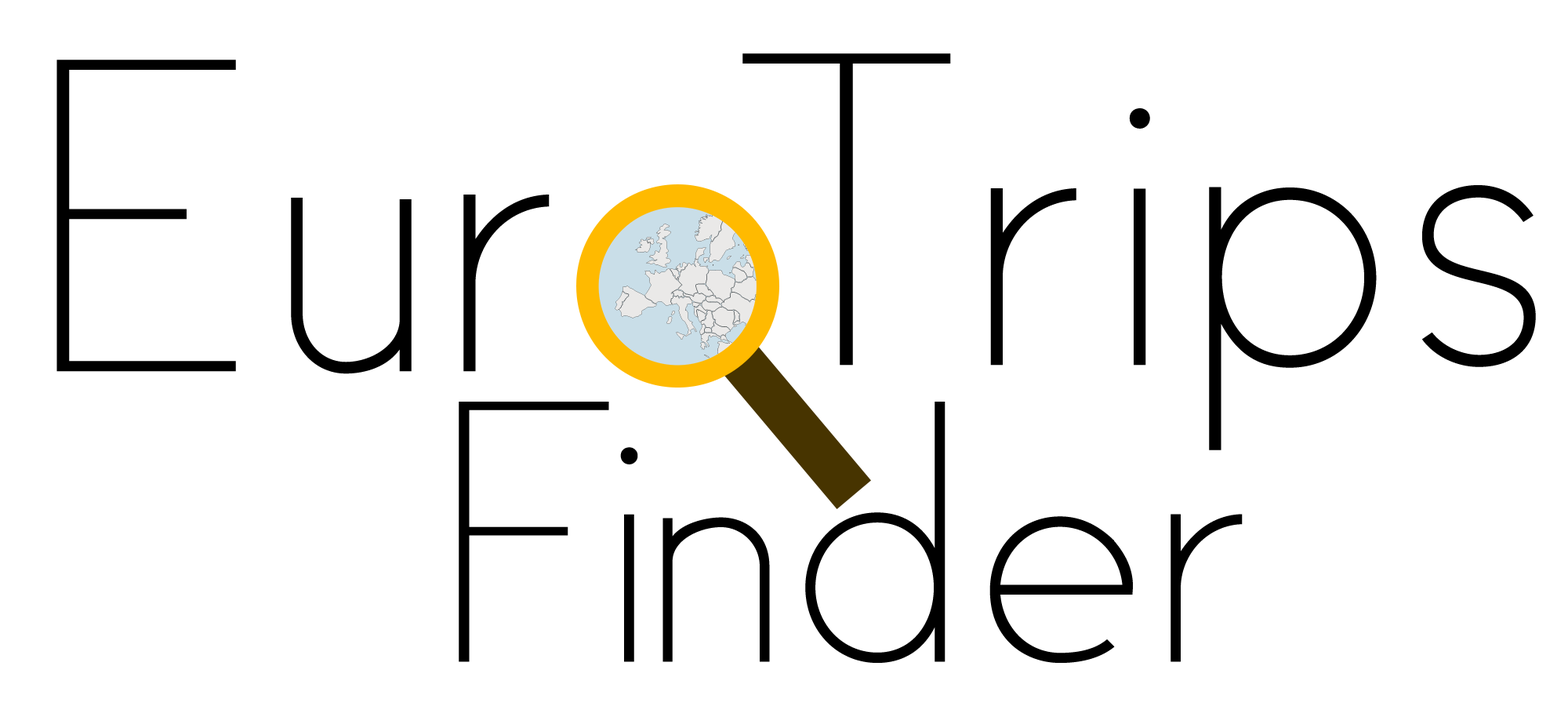
<style>
.page{position:relative;width:1568px;height:717px;background:#ffffff}
.page>*{position:absolute;margin:0}
.t1{font:393.7px "Satellite";color:#000000}
.t2{font:328.6px "Satellite";color:#000000}
.t3{font:328.6px "Satellite";letter-spacing:-0.08em;color:#000000}
</style>
<div class="page">
<p class="t1" style="left:742px;top:53px;width:794px;height:397px">Trips</p>
<p class="t1" style="left:56px;top:60px;width:494px;height:314px">Eur</p>
<p class="t2" style="left:459px;top:401px;width:784px;height:261px"><span class="t3">Fi</span>nder</p>
</div>
